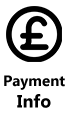
<style>
.page{position:relative;width:68px;height:131px;background:#ffffff}
.page>*{position:absolute;margin:0}
.t1{font:15px "MicrosoftTaiLe-Bold";color:#000000}
.t2{font:18px "MicrosoftTaiLe-Bold";color:#000000}
</style>
<div class="page">
<p class="t1" style="left:4px;top:75px;width:61px;height:33px;text-align:center">Payment<br><span class="t2">Info</span></p>
</div>
